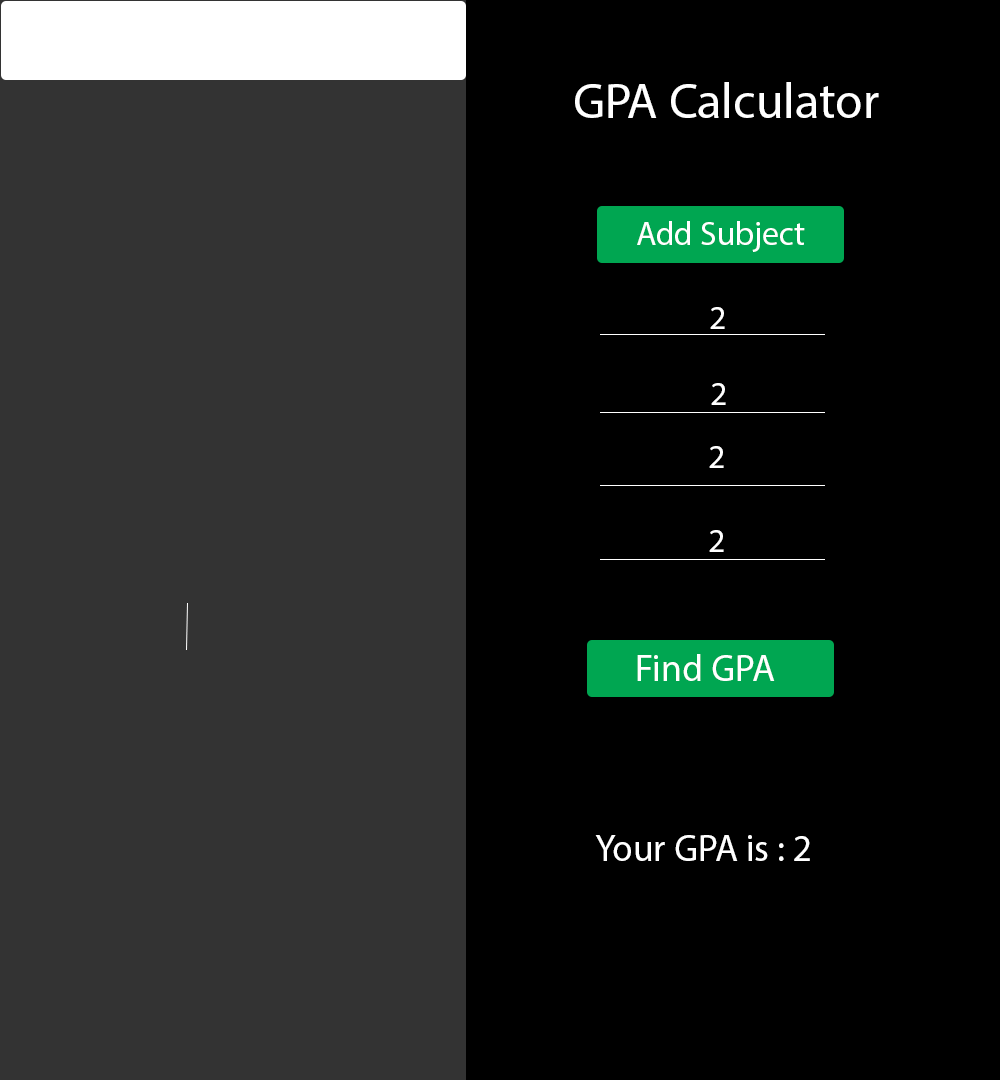
<style>
.page{position:relative;width:1000px;height:1080px;background:#000000}
.page>*{position:absolute;margin:0}
.t1{font:12px "MyriadPro-Regular";color:#ffffff}
.t2{font:33.3px "MyriadPro-Regular";color:#ffffff}
.t3{font:37.5px "MyriadPro-Regular";color:#ffffff}
</style>
<div class="page">
<p class="t1" style="left:575px;top:82px;width:304px;height:36px">GPA Calculator</p>
<p class="t2" style="left:637px;top:221px;width:168px;height:31px">Add Subject</p>
<p class="t2" style="left:710px;top:307px;width:15px;height:22px">2</p>
<p class="t2" style="left:711px;top:383px;width:15px;height:22px">2</p>
<p class="t2" style="left:709px;top:446px;width:15px;height:22px">2</p>
<p class="t2" style="left:709px;top:530px;width:15px;height:22px">2</p>
<p class="t3" style="left:637px;top:654px;width:138px;height:27px">Find GPA</p>
<p class="t3" style="left:595px;top:835px;width:215px;height:26px">Your GPA is : 2</p>
</div>
